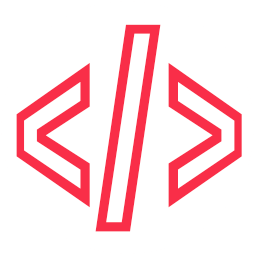
<style>
.page{position:relative;width:256px;height:256px;background:#ffffff}
.page>*{position:absolute;margin:0}
.t1{font:243px "TourneyRoman-Regular";letter-spacing:-0.05em;color:#f92e48;font-weight:bold}
</style>
<div class="page">
<p class="t1" style="left:16px;top:24px;width:226px;height:208px">&lt;/&gt;</p>
</div>
